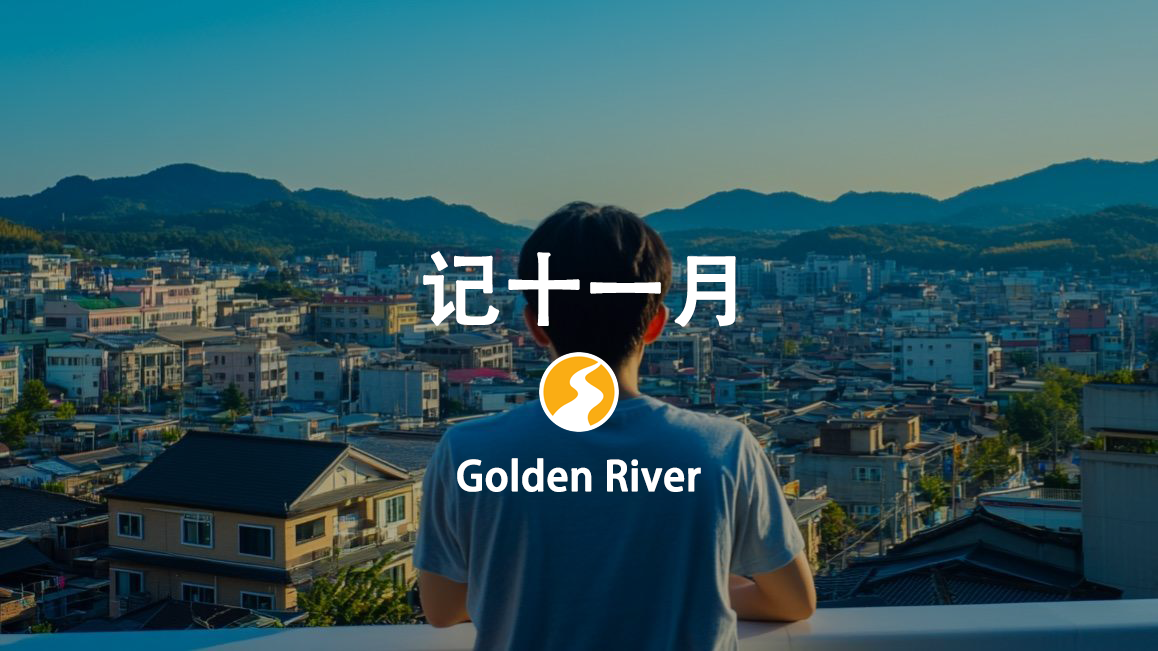
<style>
.page{position:relative;width:1158px;height:651px}
.page>*{position:absolute;margin:0}
.t1{font:80px "AdobeHeitiStd-Regular";color:#ffffff;font-weight:bold}
.t2{font:40px "AdobeHeitiStd-Regular";color:#ffffff;font-weight:bold}
</style>
<div class="page">
<p class="t1" style="left:423px;top:251px;width:313px;height:76px">记十一月</p>
<p class="t2" style="left:457px;top:458px;width:244px;height:34px">Golden River</p>
</div>
